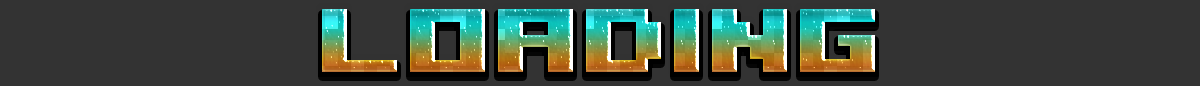
<style>
.page{position:relative;width:1200px;height:86px;background:#333333}
.page>*{position:absolute;margin:0}
.t1{font:100px "04b09";text-transform:uppercase}
</style>
<div class="page">
<p class="t1" style="left:322px;top:9px;width:553px;height:63px">LOADING</p>
</div>
